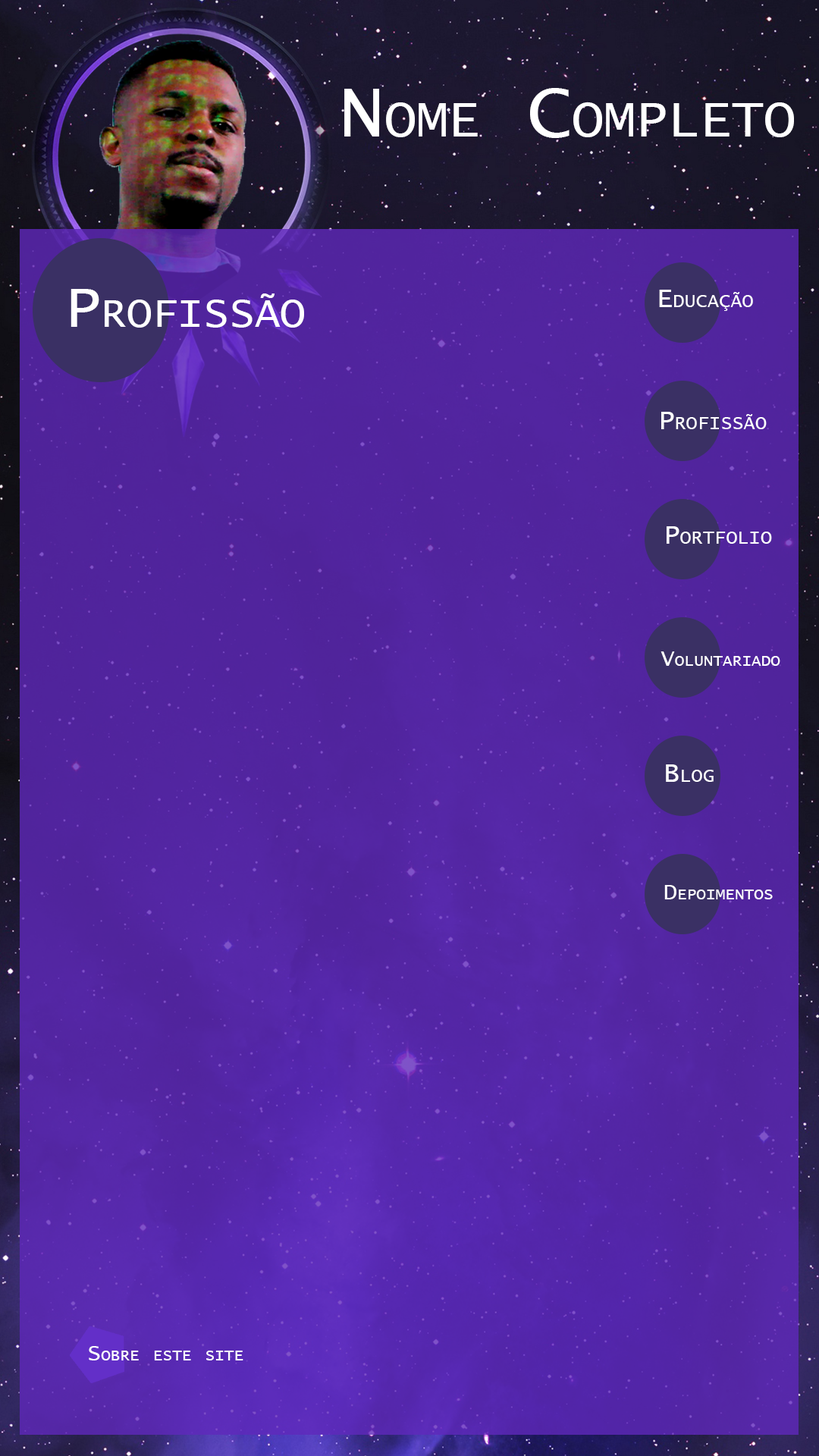
<style>
.page{position:relative;width:819px;height:1456px}
.page>*{position:absolute;margin:0}
.t1{font:75.8px "LucidaConsole";color:#ffffff;font-variant:small-caps}
.t2{font:60.7px "LucidaConsole";color:#ffffff;font-variant:small-caps}
.t3{font:27.3px "LucidaConsole";color:#ffffff;font-variant:small-caps}
.t4{font:22.7px "LucidaConsole";color:#ffffff;font-variant:small-caps}
</style>
<div class="page">
<p class="t1" style="left:344px;top:88px;width:450px;height:50px">Nome Completo</p>
<p class="t2" style="left:71px;top:289px;width:233px;height:39px">Profissão</p>
<p class="t3" style="left:659px;top:290px;width:94px;height:21px">Educação</p>
<p class="t3" style="left:661px;top:412px;width:106px;height:17px">Profissão</p>
<p class="t3" style="left:667px;top:526px;width:105px;height:18px">Portfolio</p>
<p class="t4" style="left:660px;top:651px;width:120px;height:15px">Voluntariado</p>
<p class="t3" style="left:666px;top:764px;width:48px;height:18px">Blog</p>
<p class="t4" style="left:664px;top:885px;width:109px;height:14px">Depoimentos</p>
<p class="t4" style="left:89px;top:1346px;width:154px;height:14px">Sobre este site</p>
</div>
